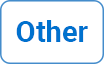
<style>
.page{position:relative;width:104px;height:64px;background:#ffffff}
.page>*{position:absolute;margin:0}
.t1{font:29.2px "Roboto-Bold";color:#0071ce}
</style>
<div class="page">
<p class="t1" style="left:16px;top:20px;width:72px;height:22px">Other</p>
</div>
